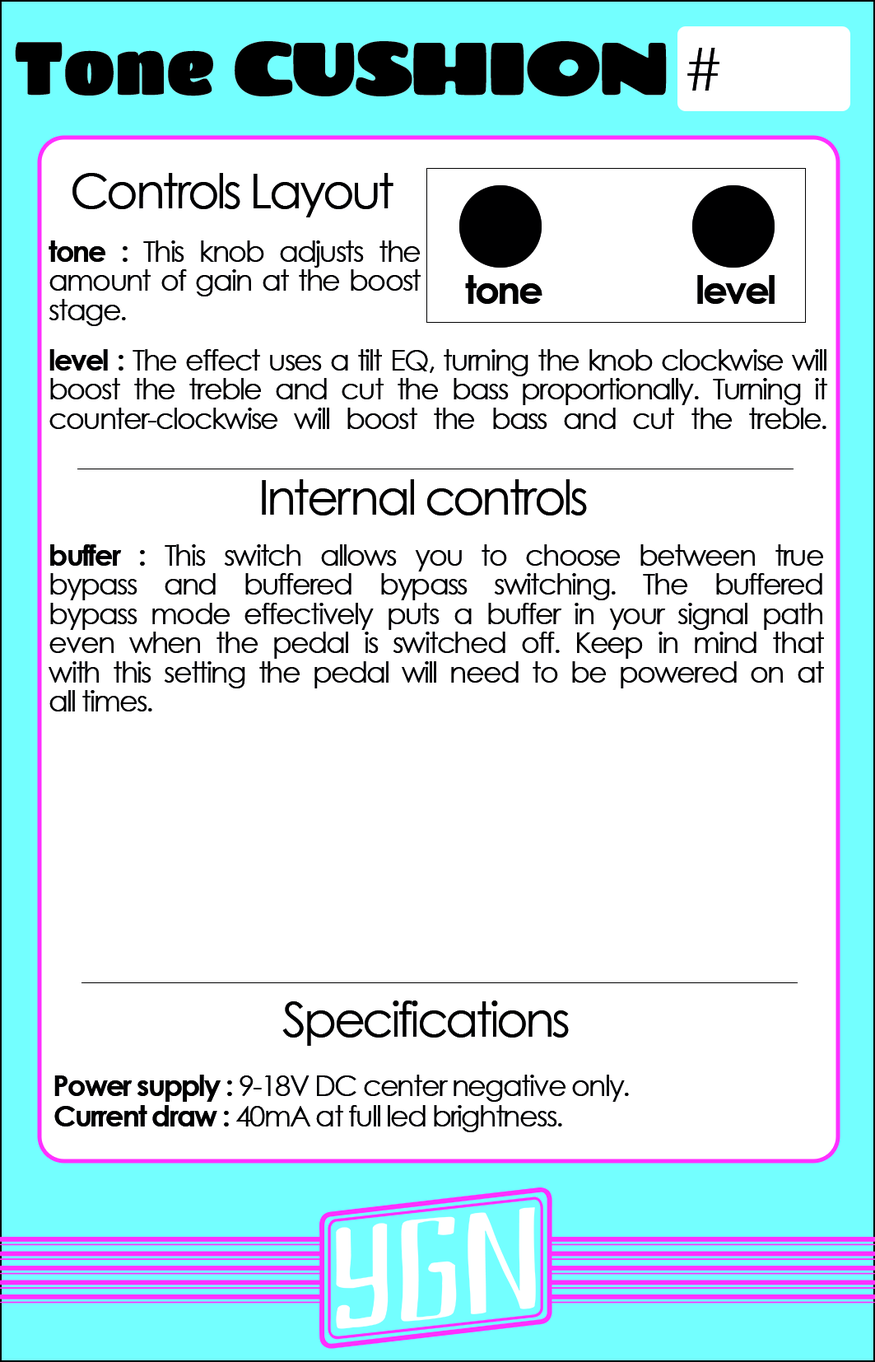
<style>
.page{position:relative;width:875px;height:1362px;background:#ffffff}
.page>*{position:absolute;margin:0}
.t1{font:73px "Chango-Regular";letter-spacing:-0.06em;color:#000000;font-weight:bold}
.t2{font:73px "TitanOne";color:#000000;font-weight:bold}
.t3{font:58.4px "CenturyGothic";color:#000000}
.t4{font:48.6px "CenturyGothic";letter-spacing:-0.06em;color:#000000}
.t5{font:29.2px/29.2px "CenturyGothic";letter-spacing:-0.06em;color:#000000}
.t6{font:29.2px/29.2px "CenturyGothic-Bold";letter-spacing:-0.06em;color:#000000}
.t7{font:38.9px "CenturyGothic-Bold";letter-spacing:-0.06em;color:#000000}
.t8{font:48.6px "CenturyGothic";color:#000000}
.t9{font:29.2px "CenturyGothic";letter-spacing:-0.06em;color:#000000}
.t10{font:29.2px "CenturyGothic-Bold";letter-spacing:-0.06em;color:#000000}
</style>
<div class="page">
<p class="t1" style="left:15px;top:41px;width:652px;height:55px"><span class="t2">Tone </span>CUSHION</p>
<p class="t3" style="left:688px;top:48px;width:32px;height:43px">#</p>
<p class="t4" style="left:72px;top:173px;width:322px;height:44px">Controls Layout</p>
<p class="t5" style="left:49px;top:240px;width:372px;height:86px;text-align:justify"><span class="t6">tone : </span>This knob adjusts the amount of gain at the boost<br>stage.</p>
<p class="t7" style="left:465px;top:275px;width:78px;height:29px">tone</p>
<p class="t7" style="left:698px;top:275px;width:77px;height:29px">level</p>
<p class="t5" style="left:49px;top:349px;width:779px;height:80px;text-align:justify"><span class="t6">level : </span>The effect uses a tilt EQ, turning the knob clockwise will boost the treble and cut the bass proportionally. Turning it <br>counter-clockwise will boost the bass and cut the treble.</p>
<p class="t4" style="left:262px;top:479px;width:325px;height:37px">Inte<span class="t8">r</span>nal controls</p>
<p class="t5" style="left:49px;top:544px;width:775px;height:168px;text-align:justify"><span class="t6">buffer : </span>This switch allows you to choose between true <br>bypass and buffered bypass switching. The buffered <br>bypass mode effectively puts a buffer in your signal path <br>even when the pedal is switched off. Keep in mind that <br>with this setting the pedal will need to be powered on at <br>all times.</p>
<p class="t4" style="left:282px;top:1001px;width:287px;height:45px">Specifications</p>
<p class="t9" style="left:54px;top:1075px;width:575px;height:27px"><span class="t10">Power supply : </span>9-18V DC center negative only.</p>
<p class="t9" style="left:54px;top:1105px;width:508px;height:27px"><span class="t10">Current draw : </span>40mA at full led brightness.</p>
</div>
